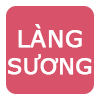
<style>
.page{position:relative;width:100px;height:100px;background:#d85269}
.page>*{position:absolute;margin:0}
.t1{font:23.4px "Verdana";color:#ffffff;font-weight:bold}
.t2{font:22px "Verdana";color:#ffffff;font-weight:bold}
</style>
<div class="page">
<p class="t1" style="left:18px;top:24px;width:64px;height:24px">LÀNG</p>
<p class="t2" style="left:8px;top:54px;width:84px;height:21px">SƯƠNG</p>
</div>
